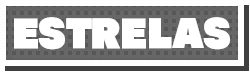
<style>
.page{position:relative;width:250px;height:72px;background:#ffffff}
.page>*{position:absolute;margin:0}
.t1{font:36px "RaglanPunchStd-UB";letter-spacing:-0.007em;color:#ffffff}
</style>
<div class="page">
<p class="t1" style="left:14px;top:17px;width:216px;height:33px">ESTRELAS</p>
</div>
